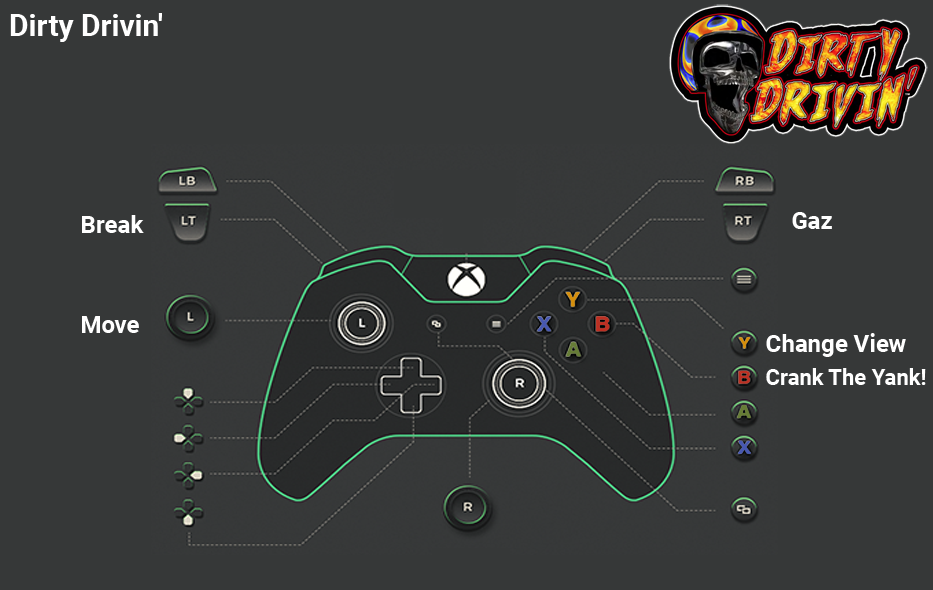
<style>
.page{position:relative;width:933px;height:590px;background:#363838}
.page>*{position:absolute;margin:0}
.t1{font:30px "Roboto-Bold";color:#ffffff}
.t2{font:24px "Roboto-Bold";color:#ffffff}
.t3{font:22px "Roboto-Bold";color:#ffffff}
</style>
<div class="page">
<p class="t1" style="left:10px;top:13px;width:152px;height:29px">Dirty Drivin'</p>
<p class="t2" style="left:82px;top:215px;width:62px;height:18px">Break</p>
<p class="t2" style="left:792px;top:212px;width:40px;height:17px">Gaz</p>
<p class="t2" style="left:82px;top:316px;width:57px;height:17px">Move</p>
<p class="t2" style="left:766px;top:333px;width:140px;height:24px">Change View</p>
<p class="t3" style="left:766px;top:368px;width:160px;height:17px">Crank The Yank!</p>
</div>
